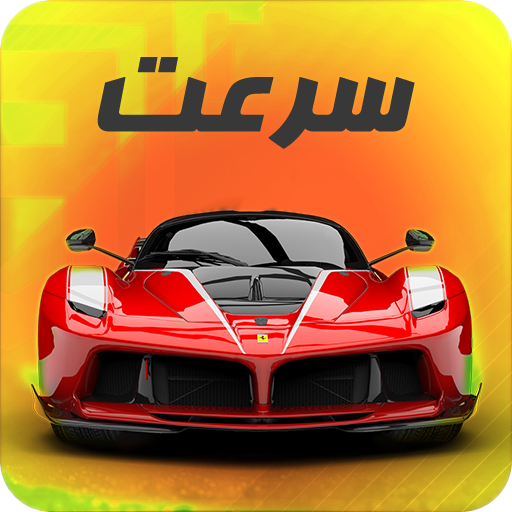
<style>
.page{position:relative;width:512px;height:512px}
.page>*{position:absolute;margin:0}
.t1{font:128px "Far.Farnaz";color:#383838;font-weight:bold}
</style>
<div class="page">
<p class="t1" style="left:97px;top:57px;width:318px;height:92px">ﺖﻋﺮﺳ</p>
</div>
